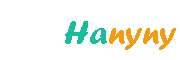
<style>
.page{position:relative;width:180px;height:60px;background:#ffffff}
.page>*{position:absolute;margin:0}
.t1{font:33.3px "ForteMT";color:#f39c12}
.t2{font:33.3px "ForteMT";color:#1abc9c}
</style>
<div class="page">
<p class="t1" style="left:65px;top:21px;width:111px;height:29px"><span class="t2">Ha</span>nyny</p>
</div>
